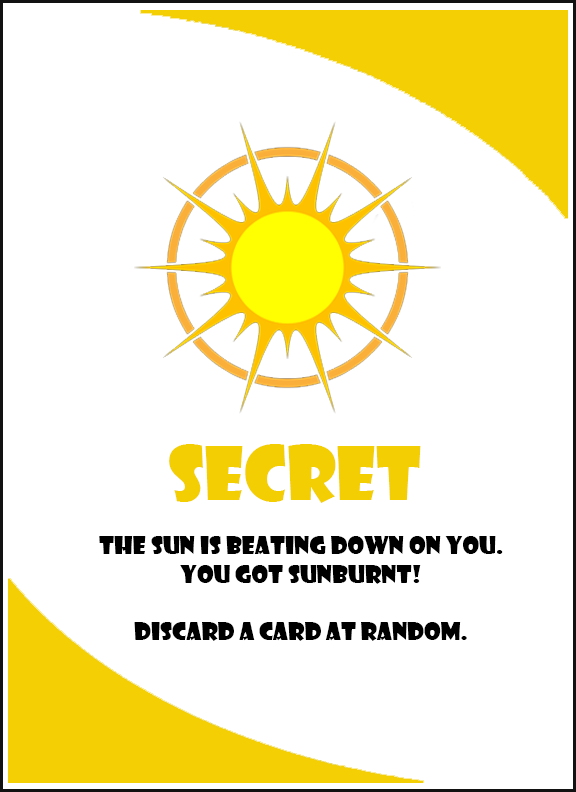
<style>
.page{position:relative;width:576px;height:792px;background:#ffffff}
.page>*{position:absolute;margin:0}
.t1{font:72px "ShowcardGothic-Reg";color:#f3ce03}
.t2{font:24px "ShowcardGothic-Reg";color:#000000}
</style>
<div class="page">
<p class="t1" style="left:169px;top:444px;width:252px;height:59px">SECRET</p>
<p class="t2" style="left:99px;top:536px;width:404px;height:105px;text-align:center">The sun is beating down on you. You got sunburnt!<br><br>Discard a card at random.</p>
</div>
